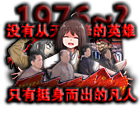
<style>
.page{position:relative;width:140px;height:140px;background:#ffffff}
.page>*{position:absolute;margin:0}
.t1{font:32.4px "AdobeHeitiStd-Regular";font-weight:bold}
.t2{font:14px "AdobeHeitiStd-Regular";font-weight:bold}
</style>
<div class="page">
<p class="t1" style="left:17px;top:5px;width:111px;height:27px">1976~?</p>
<p class="t2" style="left:6px;top:24px;width:129px;height:14px">没有从天而降的英雄</p>
<p class="t2" style="left:7px;top:88px;width:129px;height:14px">只有挺身而出的凡人</p>
</div>
